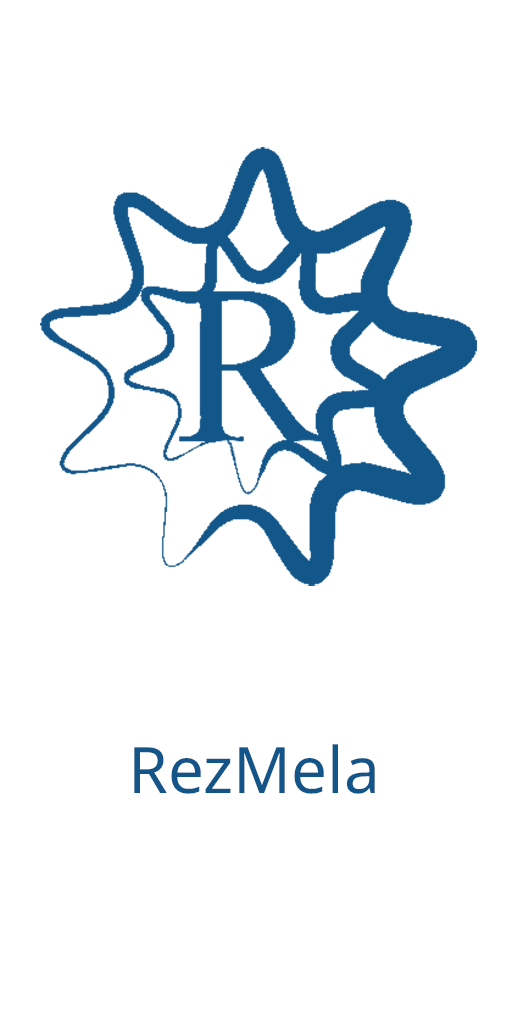
<style>
.page{position:relative;width:512px;height:1024px;background:#ffffff}
.page>*{position:absolute;margin:0}
.t1{font:64px "NotoSans-Regular";color:#135589}
</style>
<div class="page">
<p class="t1" style="left:134px;top:744px;width:241px;height:50px">RezMela</p>
</div>
